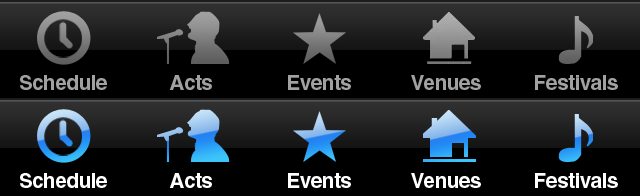
<style>
.page{position:relative;width:640px;height:196px;background:#000000}
.page>*{position:absolute;margin:0}
.t1{font:20.8px "Helvetica-Bold";letter-spacing:-0.025em;color:#a1a1a1}
.t2{font:20.8px "Helvetica-Bold";letter-spacing:-0.025em;color:#ffffff}
</style>
<div class="page">
<p class="t1" style="left:20px;top:75px;width:87px;height:15px">Schedule</p>
<p class="t1" style="left:169px;top:75px;width:43px;height:15px">Acts</p>
<p class="t1" style="left:288px;top:75px;width:63px;height:15px">Events</p>
<p class="t1" style="left:411px;top:75px;width:70px;height:15px">Venues</p>
<p class="t1" style="left:535px;top:75px;width:83px;height:15px">Festivals</p>
<p class="t2" style="left:20px;top:173px;width:87px;height:15px">Schedule</p>
<p class="t2" style="left:169px;top:173px;width:43px;height:15px">Acts</p>
<p class="t2" style="left:288px;top:173px;width:63px;height:15px">Events</p>
<p class="t2" style="left:411px;top:173px;width:70px;height:15px">Venues</p>
<p class="t2" style="left:535px;top:173px;width:83px;height:15px">Festivals</p>
</div>
